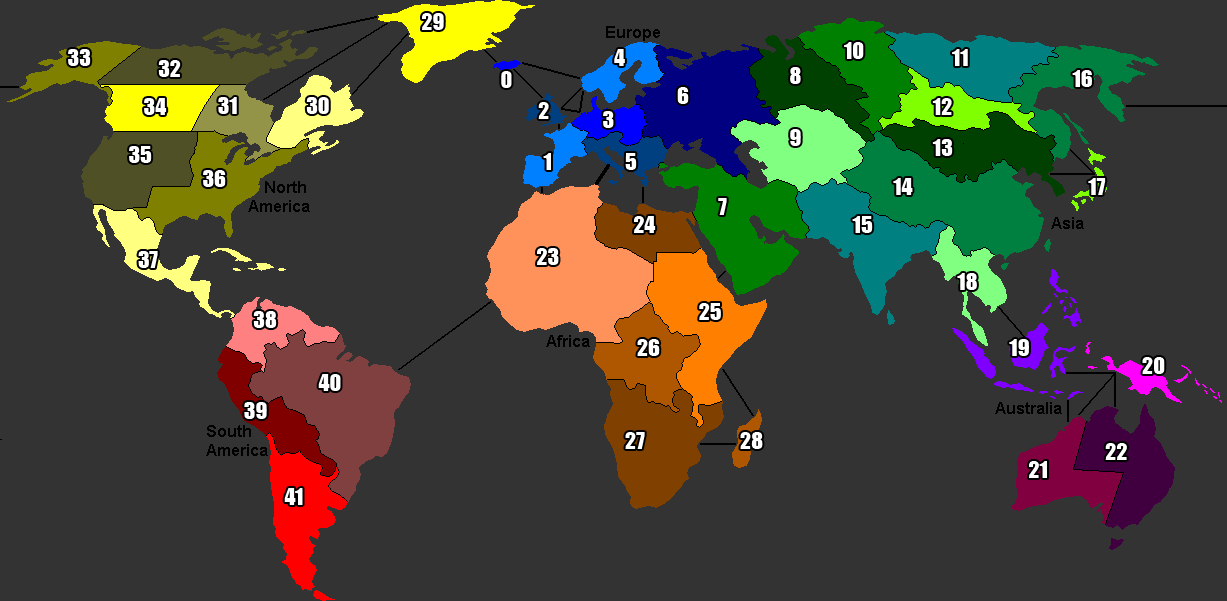
<style>
.page{position:relative;width:1227px;height:601px;background:#333333}
.page>*{position:absolute;margin:0}
.t1{font:22px "Impact";color:#ffffff}
</style>
<div class="page">
<p class="t1" style="left:422px;top:13px;width:22px;height:17px">29</p>
<p class="t1" style="left:68px;top:49px;width:23px;height:17px">33</p>
<p class="t1" style="left:614px;top:49px;width:11px;height:17px">4</p>
<p class="t1" style="left:844px;top:42px;width:20px;height:17px">10</p>
<p class="t1" style="left:952px;top:49px;width:16px;height:17px">11</p>
<p class="t1" style="left:158px;top:60px;width:23px;height:17px">32</p>
<p class="t1" style="left:501px;top:71px;width:11px;height:17px">0</p>
<p class="t1" style="left:790px;top:67px;width:11px;height:17px">8</p>
<p class="t1" style="left:1072px;top:70px;width:20px;height:17px">16</p>
<p class="t1" style="left:677px;top:87px;width:12px;height:17px">6</p>
<p class="t1" style="left:144px;top:98px;width:23px;height:17px">34</p>
<p class="t1" style="left:218px;top:97px;width:19px;height:17px">31</p>
<p class="t1" style="left:306px;top:97px;width:23px;height:17px">30</p>
<p class="t1" style="left:538px;top:102px;width:11px;height:17px">2</p>
<p class="t1" style="left:932px;top:98px;width:20px;height:17px">12</p>
<p class="t1" style="left:603px;top:111px;width:11px;height:17px">3</p>
<p class="t1" style="left:790px;top:129px;width:11px;height:17px">9</p>
<p class="t1" style="left:129px;top:146px;width:23px;height:17px">35</p>
<p class="t1" style="left:932px;top:139px;width:21px;height:17px">13</p>
<p class="t1" style="left:543px;top:153px;width:8px;height:17px">1</p>
<p class="t1" style="left:625px;top:153px;width:12px;height:17px">55</p>
<p class="t1" style="left:203px;top:170px;width:23px;height:17px">36</p>
<p class="t1" style="left:893px;top:178px;width:20px;height:17px">14</p>
<p class="t1" style="left:1088px;top:178px;width:18px;height:17px">17</p>
<p class="t1" style="left:718px;top:198px;width:9px;height:17px">7</p>
<p class="t1" style="left:634px;top:216px;width:22px;height:17px">24</p>
<p class="t1" style="left:852px;top:216px;width:21px;height:17px">15</p>
<p class="t1" style="left:138px;top:251px;width:20px;height:17px">37</p>
<p class="t1" style="left:537px;top:248px;width:22px;height:17px">23</p>
<p class="t1" style="left:957px;top:273px;width:20px;height:17px">18</p>
<p class="t1" style="left:699px;top:303px;width:22px;height:17px">25</p>
<p class="t1" style="left:253px;top:311px;width:24px;height:17px">38</p>
<p class="t1" style="left:637px;top:339px;width:23px;height:17px">26</p>
<p class="t1" style="left:1009px;top:339px;width:20px;height:17px">19</p>
<p class="t1" style="left:1142px;top:357px;width:23px;height:17px">20</p>
<p class="t1" style="left:318px;top:374px;width:23px;height:17px">40</p>
<p class="t1" style="left:244px;top:402px;width:23px;height:17px">39</p>
<p class="t1" style="left:625px;top:432px;width:20px;height:17px">27</p>
<p class="t1" style="left:740px;top:432px;width:23px;height:17px">28</p>
<p class="t1" style="left:1105px;top:443px;width:22px;height:17px">22</p>
<p class="t1" style="left:1029px;top:461px;width:18px;height:17px">21</p>
<p class="t1" style="left:284px;top:488px;width:19px;height:17px">41</p>
</div>
